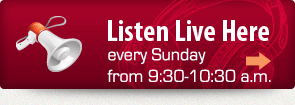
<style>
.page{position:relative;width:295px;height:105px}
.page>*{position:absolute;margin:0}
.t1{font:18px "EurostileRegular";color:#ffffff}
</style>
<div class="page">
<p class="t1" style="left:107px;top:48px;width:164px;height:34px">every Sunday<br>from 9:30-10:30 a.m.</p>
</div>
